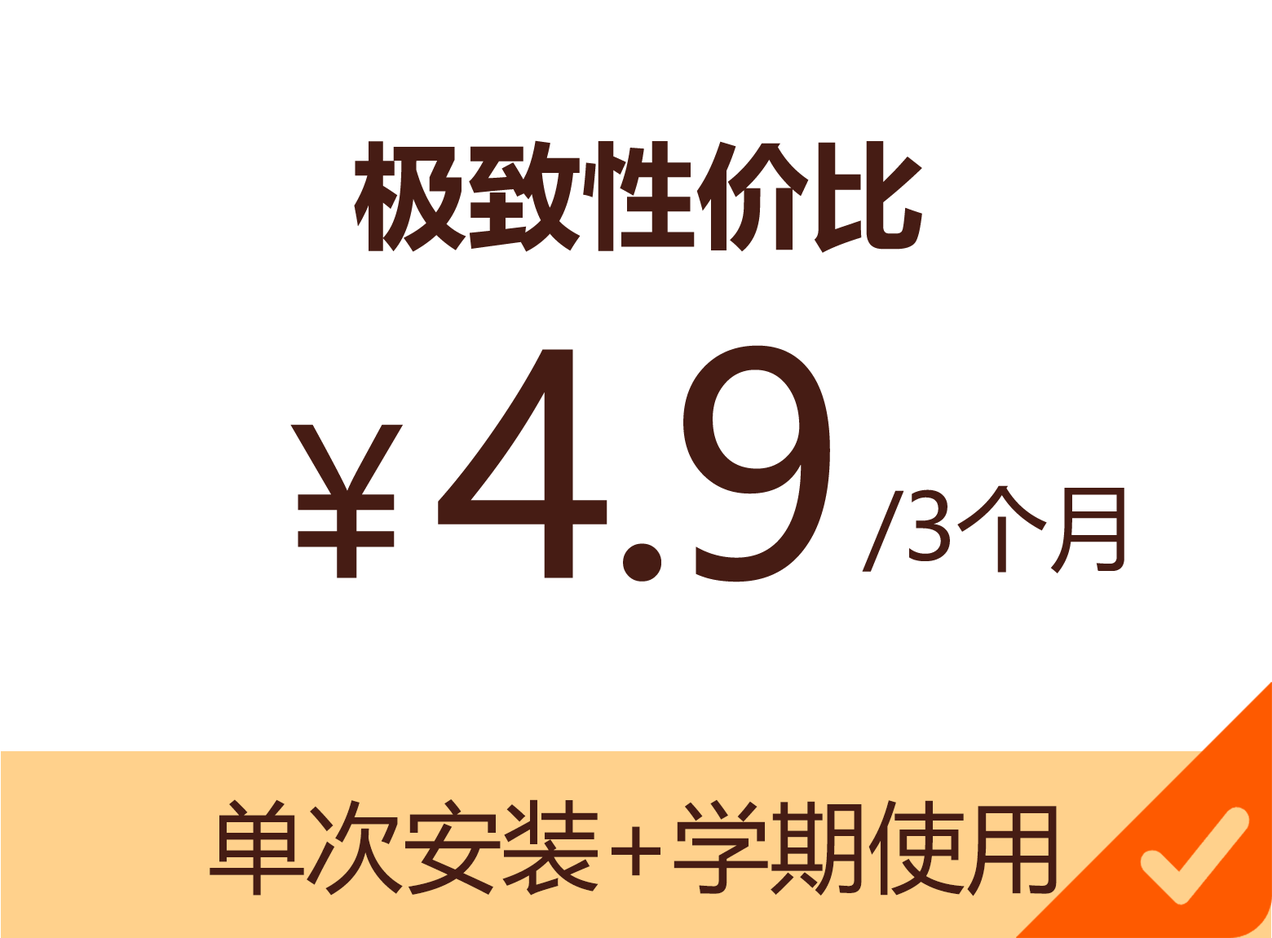
<style>
.page{position:relative;width:1272px;height:938px;background:#ffffff}
.page>*{position:absolute;margin:0}
.t1{font:114.1px "MicrosoftYaHei-Bold";color:#461c14}
.t2{font:301.7px "MicrosoftYaHei";color:#461c14}
.t3{font:202.2px "MicrosoftYaHei";color:#461c14}
.t4{font:91.3px "MicrosoftYaHei";color:#461c14}
.t5{font:97.8px "MicrosoftYaHei";color:#461c14}
</style>
<div class="page">
<p class="t1" style="left:354px;top:140px;width:568px;height:113px">极致性价比</p>
<p class="t2" style="left:438px;top:345px;width:392px;height:237px">4.9</p>
<p class="t3" style="left:290px;top:424px;width:113px;height:154px">￥</p>
<p class="t4" style="left:862px;top:485px;width:262px;height:88px">/3个月</p>
<p class="t5" style="left:210px;top:799px;width:847px;height:97px">单次安装+学期使用</p>
</div>
